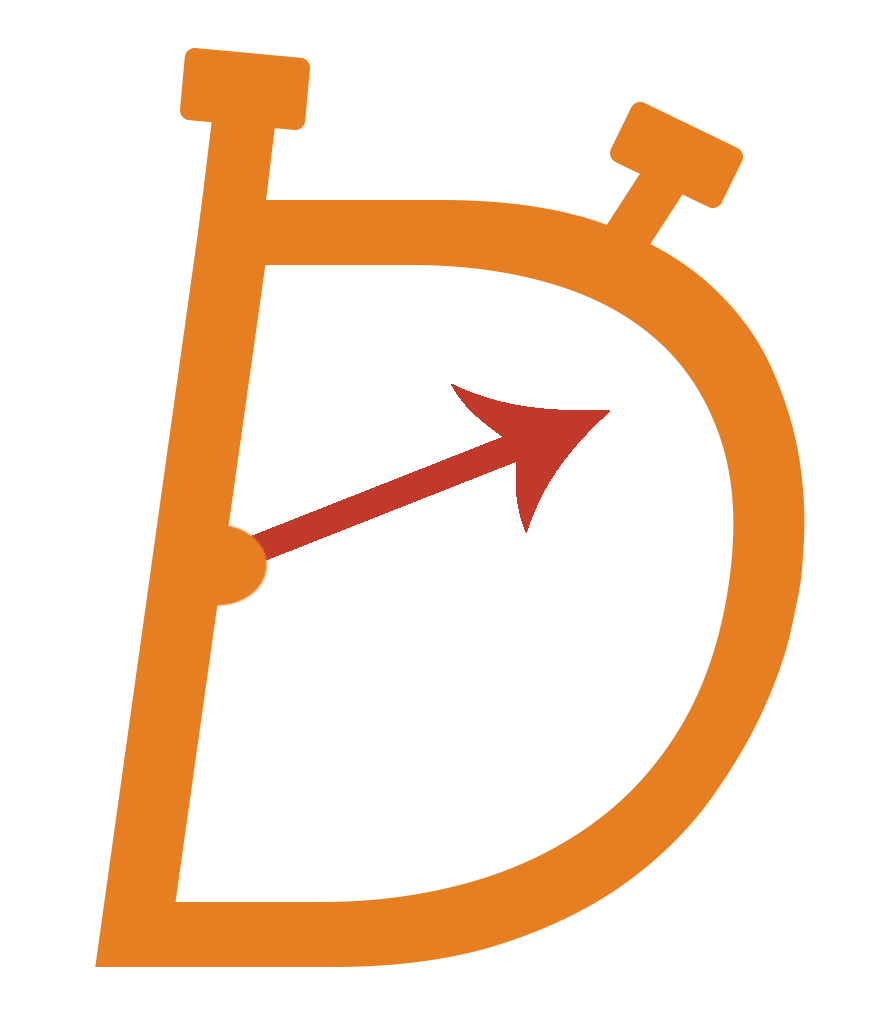
<style>
.page{position:relative;width:894px;height:1027px;background:#ffffff}
.page>*{position:absolute;margin:0}
.t1{font:1083.3px "Avenir-LightOblique";color:#e67e22}
</style>
<div class="page">
<p class="t1" style="left:95px;top:200px;width:710px;height:767px">D</p>
</div>
